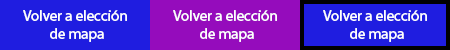
<style>
.page{position:relative;width:450px;height:50px;background:#1f1de0}
.page>*{position:absolute;margin:0}
.t1{font:15px "MyriadHebrew-Regular";color:#fefefe}
</style>
<div class="page">
<p class="t1" style="left:23px;top:10px;width:104px;height:32px;text-align:center">Volver a elección <br>de mapa</p>
<p class="t1" style="left:173px;top:10px;width:104px;height:32px;text-align:center">Volver a elección <br>de mapa</p>
<p class="t1" style="left:323px;top:10px;width:104px;height:32px;text-align:center">Volver a elección <br>de mapa</p>
</div>
